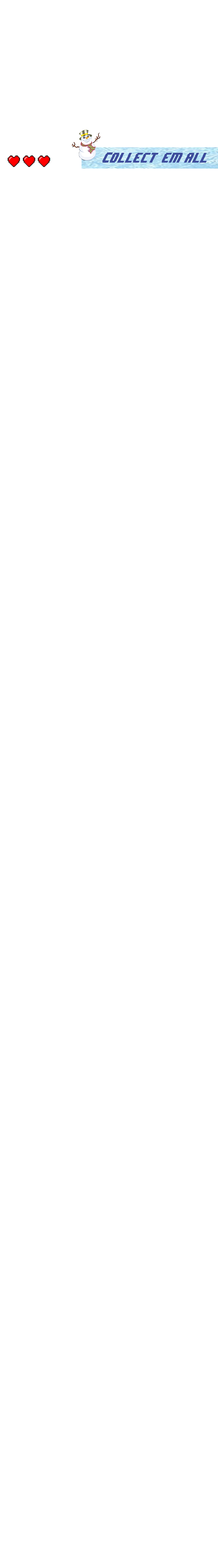
<style>
.page{position:relative;width:218px;height:1568px;background:#ffffff}
.page>*{position:absolute;margin:0}
.t1{font:13.1px "8BITWONDERNominal";color:#3d4c9b;scale:0.58 1}
.t2{font:13.1px "RageItalic";color:#3d4c9b;scale:0.58 1}
</style>
<div class="page">
<p class="t1" style="left:102px;top:152px;width:105px;height:11px">Collect <span class="t2">‘</span>em all</p>
</div>
